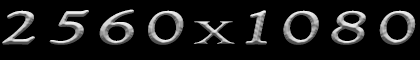
<style>
.page{position:relative;width:420px;height:60px;background:#000000}
.page>*{position:absolute;margin:0}
.t1{font:48px "GoudyOldStyleT-Italic";letter-spacing:0.075em;font-variant:small-caps;font-weight:bold;scale:1.67 1}
.t2{font:36px "RingbearerMedium";letter-spacing:0.075em;scale:1.67 1}
</style>
<div class="page">
<p class="t1" style="left:2px;top:9px;width:414px;height:36px">2560<span class="t2">x</span>1080</p>
<p class="t1" style="left:2px;top:9px;width:414px;height:36px">2560<span class="t2">x</span>1080</p>
</div>
